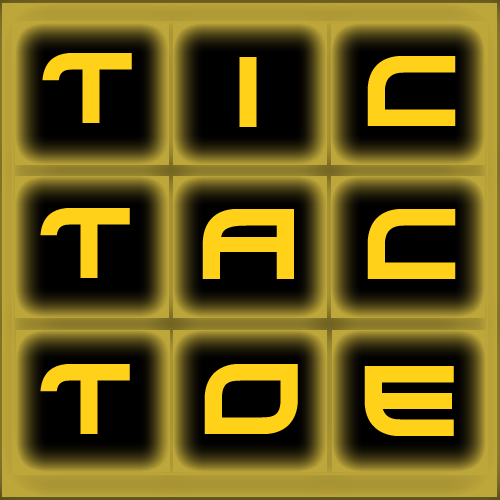
<style>
.page{position:relative;width:500px;height:500px}
.page>*{position:absolute;margin:0}
.t1{font:100px "Xirod-Regular";color:#ffd118}
</style>
<div class="page">
<p class="t1" style="left:42px;top:53px;width:90px;height:70px">T</p>
<p class="t1" style="left:239px;top:57px;width:18px;height:70px">I</p>
<p class="t1" style="left:367px;top:56px;width:89px;height:70px">C</p>
<p class="t1" style="left:40px;top:208px;width:90px;height:70px">T</p>
<p class="t1" style="left:202px;top:209px;width:92px;height:70px">A</p>
<p class="t1" style="left:367px;top:209px;width:89px;height:70px">C</p>
<p class="t1" style="left:40px;top:364px;width:90px;height:70px">T</p>
<p class="t1" style="left:204px;top:364px;width:94px;height:70px">O</p>
<p class="t1" style="left:364px;top:366px;width:90px;height:70px">E</p>
</div>
